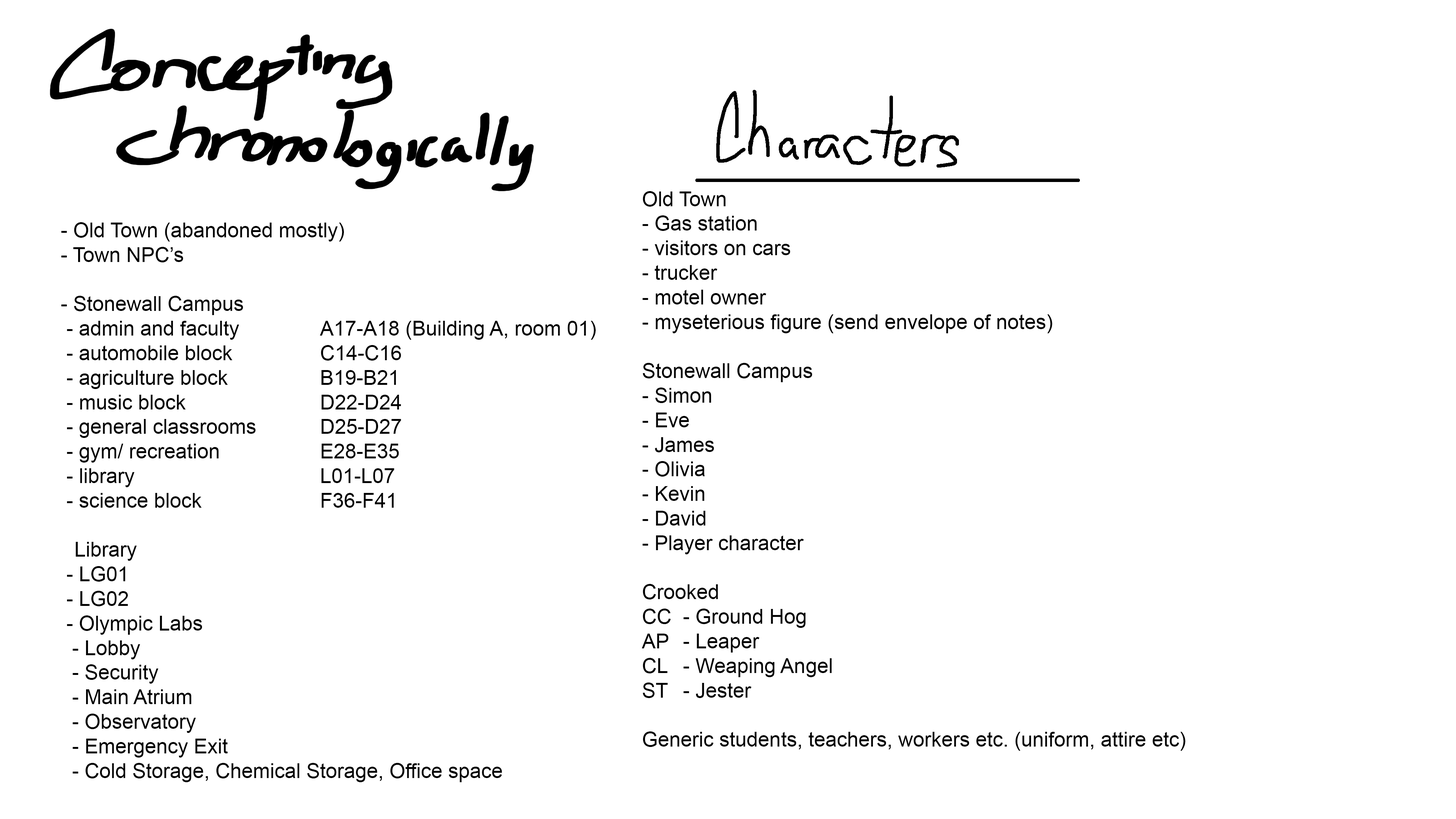
<style>
.page{position:relative;width:1456px;height:819px;background:#ffffff}
.page>*{position:absolute;margin:0}
.t1{font:20.5px "ArialMT";color:#000000}
</style>
<div class="page">
<p class="t1" style="left:642px;top:191px;width:543px;height:560px">Old Town<br>- Gas station<br>- visitors on cars<br>- trucker<br>- motel owner<br>- myseterious figure (send envelope of notes)<br><br>Stonewall Campus<br>- Simon<br>- Eve<br>- James <br>- Olivia<br>- Kevin<br>- David <br>- Player character<br><br>Crooked<br>CC  - Ground Hog<br>AP - Leaper<br>CL  - Weaping Angel<br>ST  - Jester<br><br>Generic students, teachers, workers etc. (uniform, attire etc)</p>
<p class="t1" style="left:61px;top:222px;width:535px;height:560px">- Old Town (abandoned mostly)<br>- Town NPC’s<br><br>- Stonewall Campus<br> - admin and faculty       A17-A18 (Building A, room 01)<br> - automobile block       C14-C16<br> - agriculture block        B19-B21<br> - music block          D22-D24<br> - general classrooms      D25-D27<br> - gym/ recreation        E28-E35<br> - library               L01-L07<br> - science block         F36-F41<br><br> Library<br> - LG01<br> - LG02<br> - Olympic Labs<br>  - Lobby<br>  - Security<br>  - Main Atrium<br>  - Observatory<br>  - Emergency Exit<br>  - Cold Storage, Chemical Storage, Office space</p>
</div>
